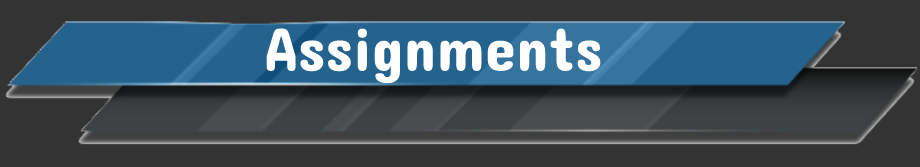
<style>
.page{position:relative;width:920px;height:167px;background:#333333}
.page>*{position:absolute;margin:0}
.t1{font:62.1px "Dangrek-Regular";color:#ffffff}
</style>
<div class="page">
<p class="t1" style="left:266px;top:28px;width:335px;height:56px">Assignments</p>
</div>
